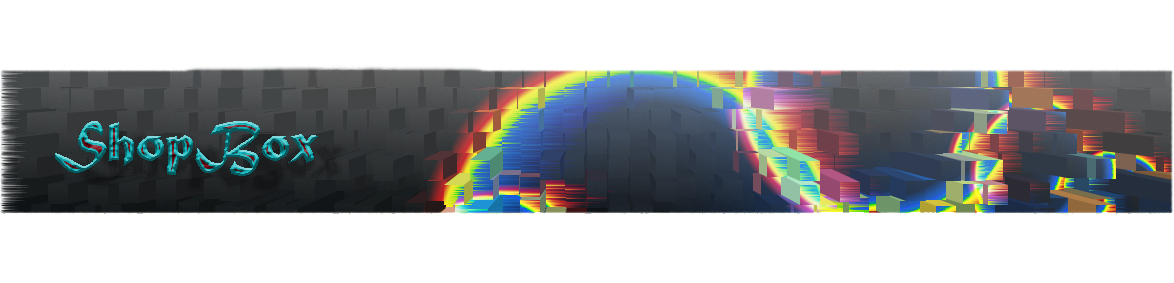
<style>
.page{position:relative;width:1174px;height:283px;background:#ffffff}
.page>*{position:absolute;margin:0}
.t1{font:60px "MaturaMTScriptCapitals"}
</style>
<div class="page">
<p class="t1" style="left:55px;top:121px;width:263px;height:55px">ShopBox</p>
</div>
